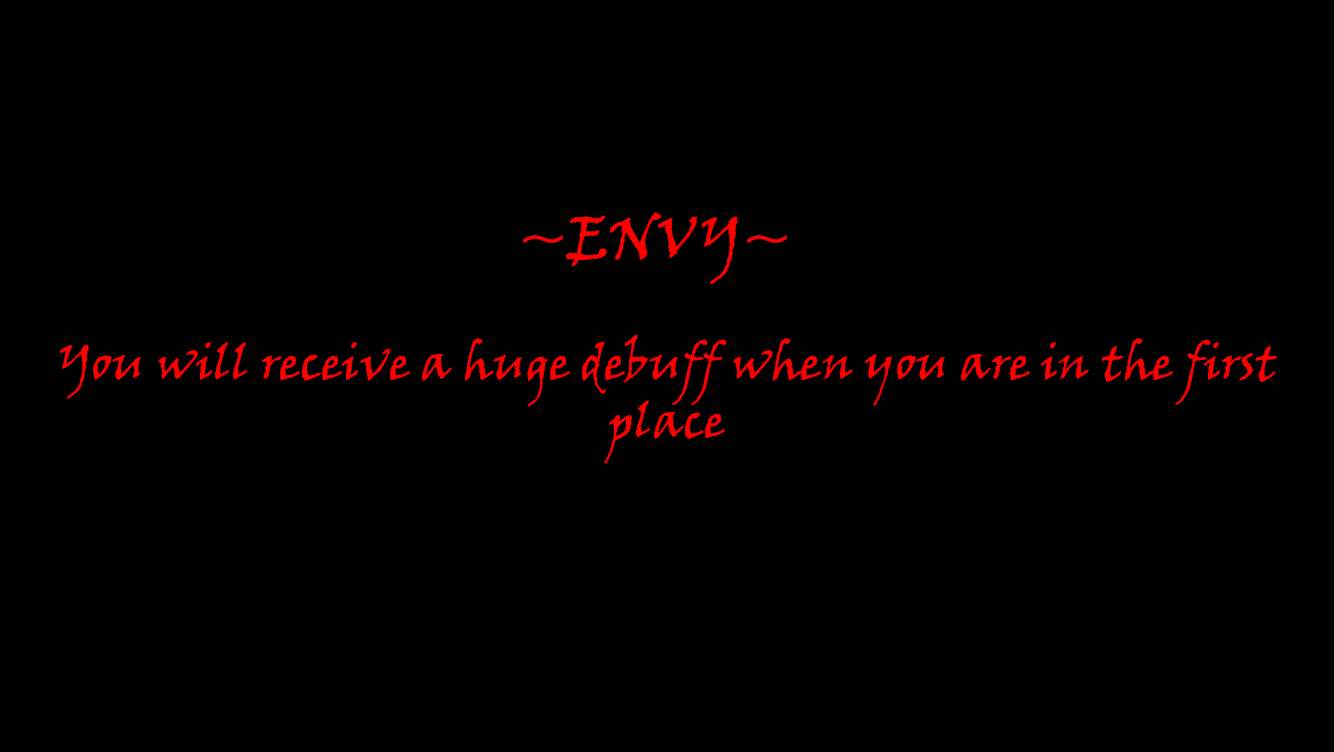
<style>
.page{position:relative;width:1334px;height:752px;background:#000000}
.page>*{position:absolute;margin:0}
.t1{font:60px "VinerHandITC";color:#ff0000}
.t2{font:48px "VinerHandITC";color:#ff0000}
</style>
<div class="page">
<p class="t1" style="left:523px;top:212px;width:264px;height:72px">~ENVY~</p>
<p class="t2" style="left:60px;top:334px;width:1218px;height:130px;text-align:center">You will receive a huge debuff when you are in the first place</p>
</div>
